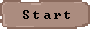
<style>
.page{position:relative;width:90px;height:29px;background:#ab8c7f}
.page>*{position:absolute;margin:0}
.t1{font:13px "Terminal";letter-spacing:0.04em;color:#000000}
</style>
<div class="page">
<p class="t1" style="left:23px;top:10px;width:47px;height:9px">Start</p>
</div>
